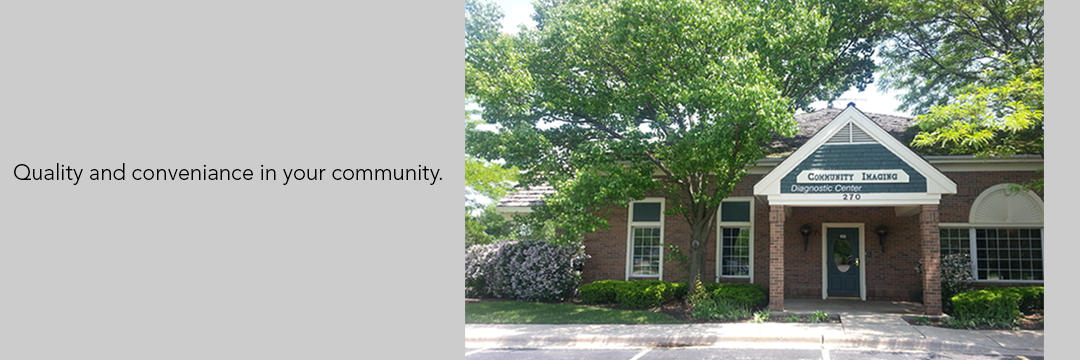
<style>
.page{position:relative;width:1080px;height:360px;background:#cccccc}
.page>*{position:absolute;margin:0}
.t1{font:22px "AvenirLTStd-Light";color:#000000}
</style>
<div class="page">
<p class="t1" style="left:14px;top:163px;width:428px;height:22px">Quality and conveniance in your community.</p>
</div>
